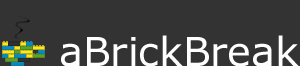
<style>
.page{position:relative;width:300px;height:66px;background:#333333}
.page>*{position:absolute;margin:0}
.t1{font:40px "Verdana";color:#ffffff}
</style>
<div class="page">
<p class="t1" style="left:61px;top:35px;width:238px;height:32px">aBrickBreak</p>
</div>
